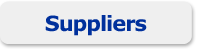
<style>
.page{position:relative;width:200px;height:53px;background:#efefef}
.page>*{position:absolute;margin:0}
.t1{font:21px "Verdana-Bold";letter-spacing:-0.05em;color:#00309c}
</style>
<div class="page">
<p class="t1" style="left:45px;top:15px;width:102px;height:21px">Suppliers</p>
</div>
